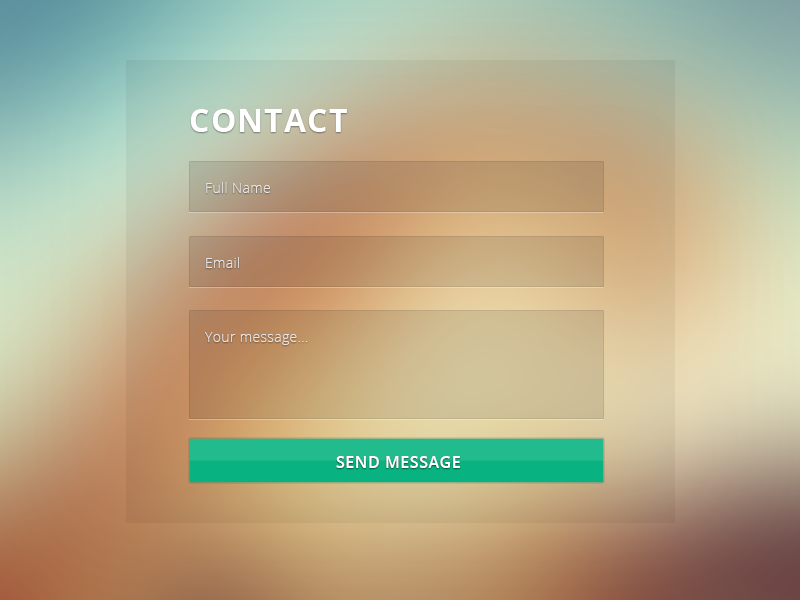
<style>
.page{position:relative;width:800px;height:600px}
.page>*{position:absolute;margin:0}
.t1{font:32px "OpenSans-Bold";letter-spacing:0.035em;color:#ffffff;text-transform:uppercase}
.t2{font:14px "OpenSans-Light";letter-spacing:0.025em;color:#e5e5e5}
.t3{font:16px "OpenSans-Semibold";letter-spacing:0.035em;color:#ffffff}
</style>
<div class="page">
<p class="t1" style="left:190px;top:109px;width:157px;height:23px">Contact</p>
<p class="t2" style="left:206px;top:182px;width:64px;height:11px">Full Name</p>
<p class="t2" style="left:206px;top:257px;width:33px;height:11px">Email</p>
<p class="t2" style="left:205px;top:332px;width:103px;height:13px">Your message...</p>
<p class="t3" style="left:336px;top:456px;width:124px;height:12px">SEND MESSAGE</p>
</div>
